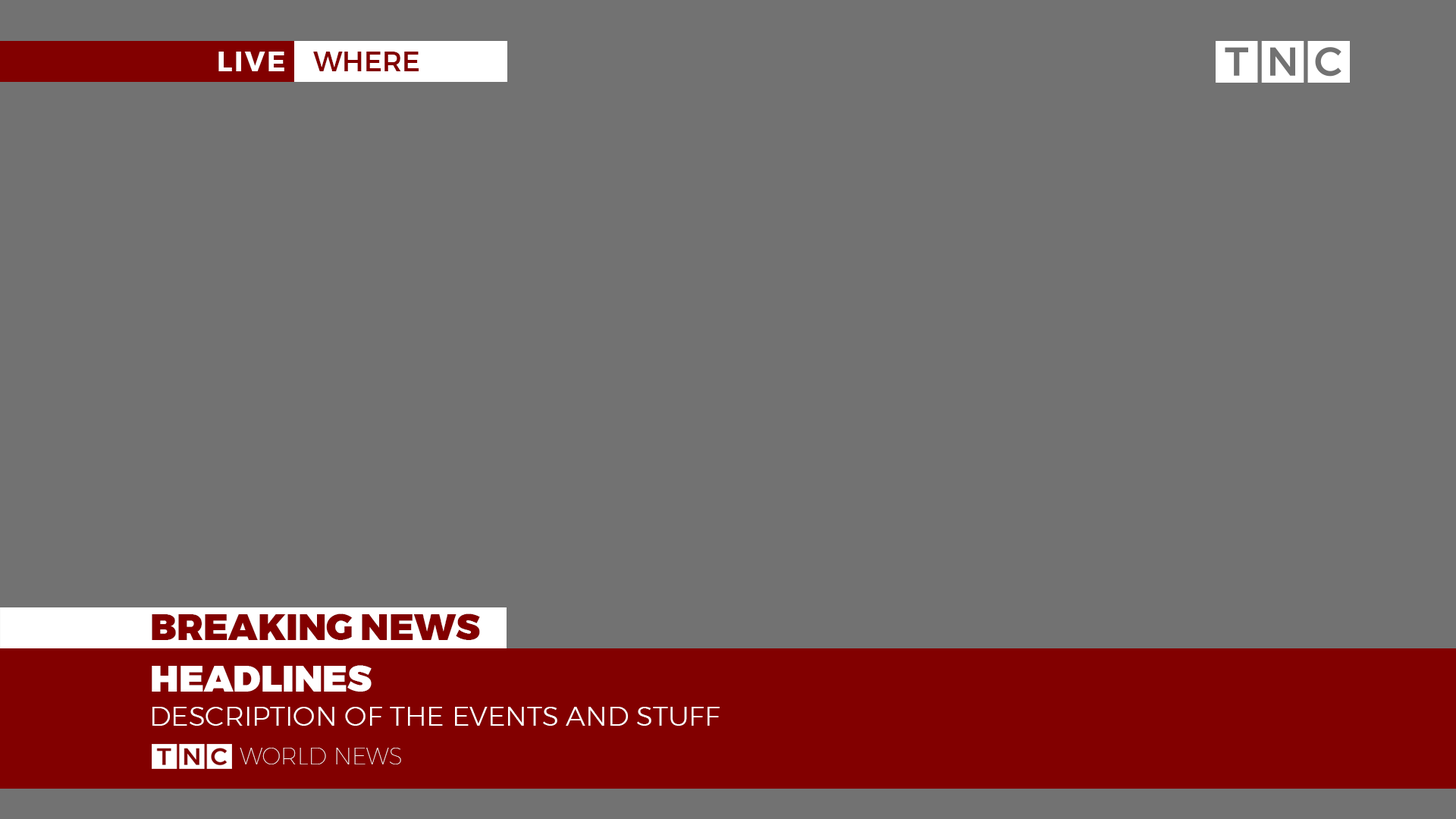
<style>
.page{position:relative;width:1456px;height:819px;background:#727272}
.page>*{position:absolute;margin:0}
.t1{font:27.3px "Montserrat-Bold";letter-spacing:0.075em;color:#ffffff;text-transform:uppercase}
.t2{font:27.3px "Montserrat-Medium";color:#820000;text-transform:uppercase}
.t3{font:36.4px "Montserrat-Black";color:#820000}
.t4{font:36.4px "Montserrat-Black";color:#ffffff}
.t5{font:27.3px "Montserrat-Light";color:#ffffff;text-transform:uppercase}
.t6{font:22.7px "Montserrat-Thin";color:#ffffff;text-transform:uppercase}
</style>
<div class="page">
<p class="t1" style="left:218px;top:52px;width:66px;height:19px">LIVE</p>
<p class="t2" style="left:313px;top:52px;width:106px;height:19px">WHERE</p>
<p class="t3" style="left:152px;top:613px;width:328px;height:27px">BREAKING NEWS</p>
<p class="t4" style="left:152px;top:665px;width:220px;height:27px">HEADLINES</p>
<p class="t5" style="left:152px;top:707px;width:568px;height:19px">description of the events and stuff</p>
<p class="t6" style="left:240px;top:748px;width:161px;height:16px">WORLD NEWS</p>
</div>
